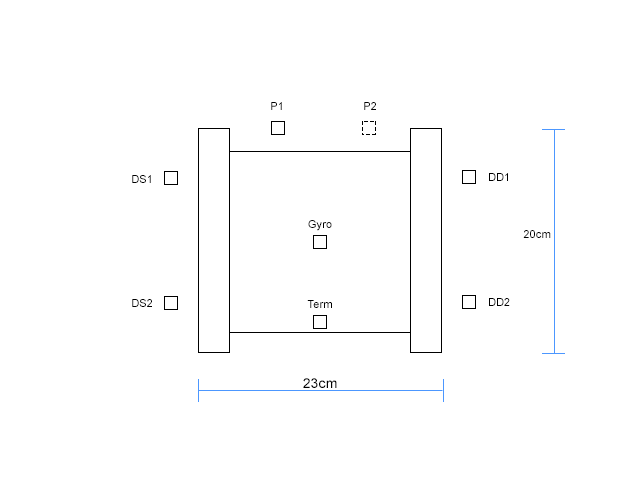
<style>
.page{position:relative;width:640px;height:480px;background:#ffffff}
.page>*{position:absolute;margin:0}
.t1{font:11px "ArialMT";letter-spacing:0.01em;color:#000000}
.t2{font:14px "ArialMT";letter-spacing:0.01em;color:#000000}
</style>
<div class="page">
<p class="t1" style="left:271px;top:102px;width:11px;height:8px">P1</p>
<p class="t1" style="left:364px;top:102px;width:12px;height:8px">P2</p>
<p class="t1" style="left:489px;top:173px;width:19px;height:8px">DD1</p>
<p class="t1" style="left:132px;top:175px;width:19px;height:8px">DS1</p>
<p class="t1" style="left:308px;top:220px;width:24px;height:11px">Gyro</p>
<p class="t1" style="left:523px;top:230px;width:28px;height:8px">20cm</p>
<p class="t1" style="left:132px;top:299px;width:20px;height:8px">DS2</p>
<p class="t1" style="left:307px;top:300px;width:25px;height:8px">Term</p>
<p class="t1" style="left:489px;top:298px;width:21px;height:8px">DD2</p>
<p class="t2" style="left:303px;top:378px;width:34px;height:10px">23cm</p>
</div>
